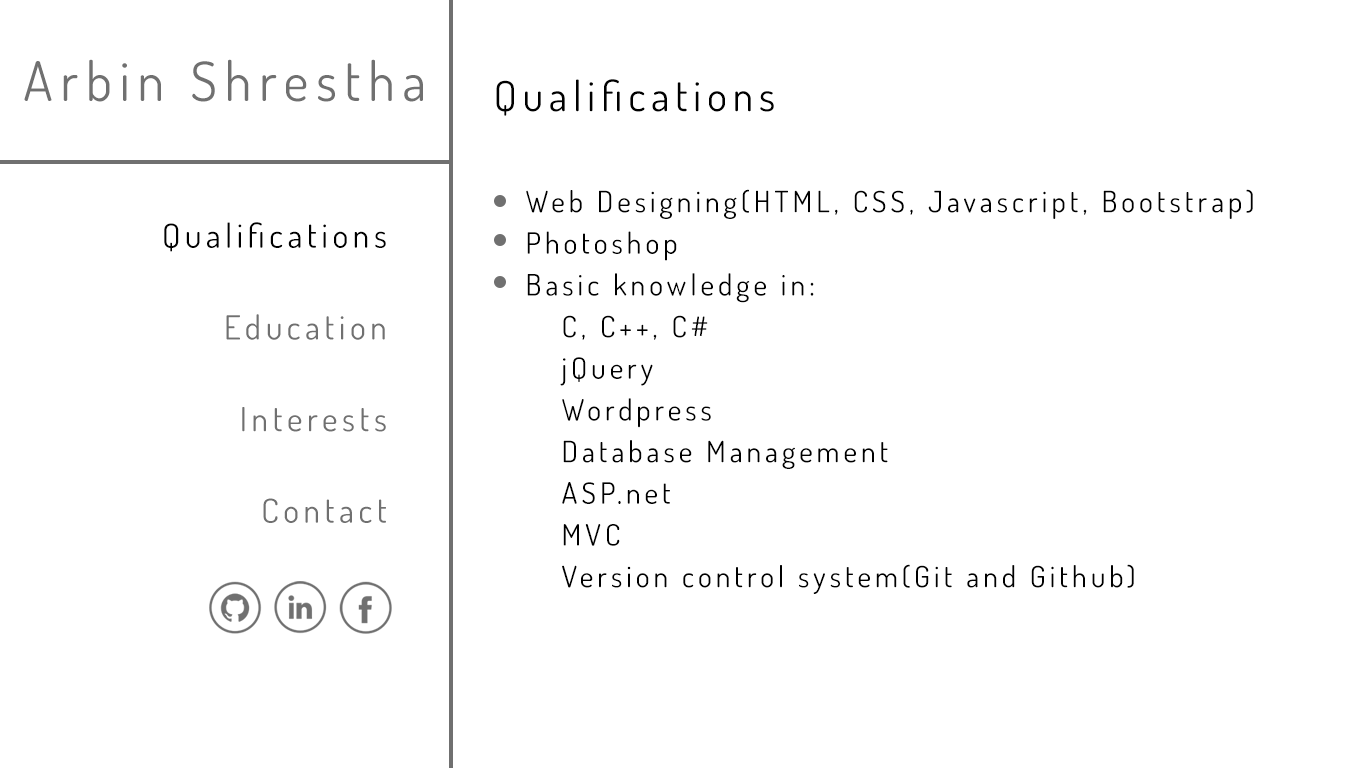
<style>
.page{position:relative;width:1366px;height:768px;background:#ffffff}
.page>*{position:absolute;margin:0}
.t1{font:54.2px "Dosis-Regular";letter-spacing:0.14em;color:#707070}
.t2{font:41.7px "Dosis-Regular";letter-spacing:0.14em;color:#000000}
.t3{font:29.2px/20.8px "Dosis-Regular";letter-spacing:0.14em;color:#000000}
.t4{font:33.3px/91.7px "Dosis-Regular";letter-spacing:0.14em;color:#707070}
.t5{font:33.3px/91.7px "Dosis-Regular";letter-spacing:0.14em;color:#000000}
</style>
<div class="page">
<p class="t1" style="left:24px;top:59px;width:399px;height:43px">Arbin Shrestha</p>
<p class="t2" style="left:496px;top:79px;width:278px;height:37px">Qualifications</p>
<p class="t3" style="left:526px;top:189px;width:727px;height:405px">Web Designing(HTML, CSS, Javascript, Bootstrap)<br><br>Photoshop<br><br>Basic knowledge in:<br><br> C, C++, C#<br><br> jQuery<br><br> Wordpress<br><br> Database Management<br><br> ASP.net<br><br> MVC<br><br> Version control system(Git and Github)</p>
<p class="t4" style="left:164px;top:222px;width:222px;height:301px;text-align:right"><span class="t5">Qualifications<br></span>Education<br>Interests<br>Contact</p>
</div>
